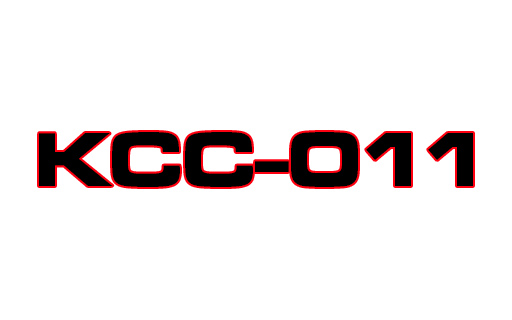
<style>
.page{position:relative;width:512px;height:320px;background:#ffffff}
.page>*{position:absolute;margin:0}
.t1{font:80px "MicrogrammaD-BoldExte";color:#000000}
</style>
<div class="page">
<p class="t1" style="left:39px;top:132px;width:434px;height:55px">KCC-011</p>
</div>
